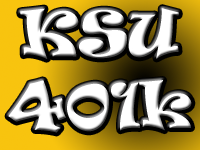
<style>
.page{position:relative;width:200px;height:150px}
.page>*{position:absolute;margin:0}
.t1{font:60px "Ravie";color:#ffffff}
</style>
<div class="page">
<p class="t1" style="left:8px;top:8px;width:184px;height:125px;text-align:center">KSU 401k</p>
</div>
